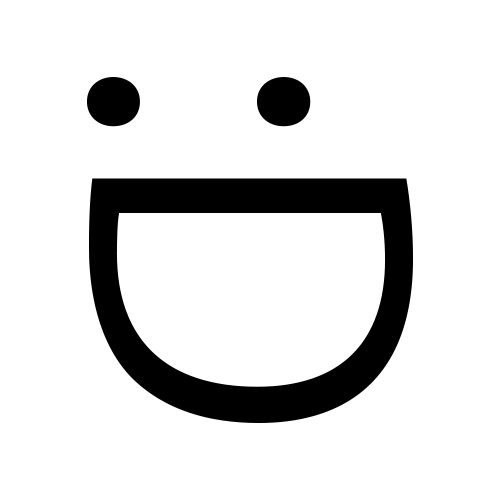
<style>
.page{position:relative;width:500px;height:500px;background:#ffffff}
.page>*{position:absolute;margin:0}
.t1{font:416.7px "KozGoPr6N-Regular";color:#000000}
</style>
<div class="page">
<p class="t1" style="left:86px;top:77px;width:327px;height:346px;rotate:90deg">:D</p>
</div>
